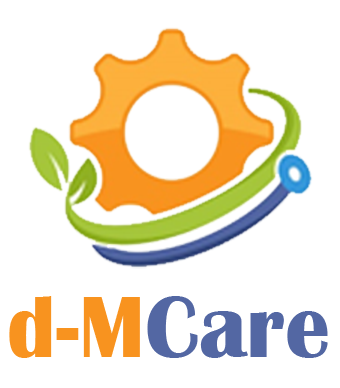
<style>
.page{position:relative;width:340px;height:388px;background:#ffffff}
.page>*{position:absolute;margin:0}
.t1{font:90px "BritannicBold";color:#5367a3}
.t2{font:90px "BritannicBold";color:#f8931f}
</style>
<div class="page">
<p class="t1" style="left:9px;top:296px;width:319px;height:62px"><span class="t2">d-M</span>Care</p>
</div>
